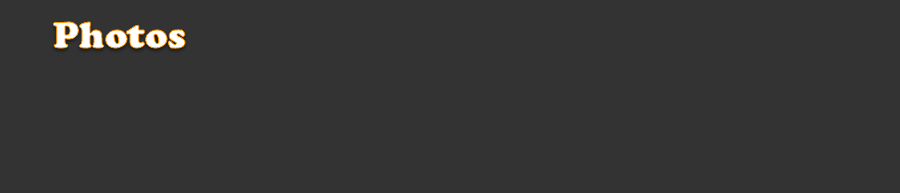
<style>
.page{position:relative;width:900px;height:193px;background:#333333}
.page>*{position:absolute;margin:0}
.t1{font:36px "CooperBlackStd";color:#ffffff}
</style>
<div class="page">
<p class="t1" style="left:53px;top:22px;width:132px;height:27px">Photos</p>
</div>
